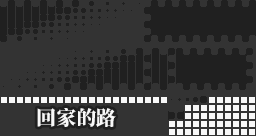
<style>
.page{position:relative;width:256px;height:136px;background:#333333}
.page>*{position:absolute;margin:0}
.t1{font:20px "SourceHanSerifSC-Heavy";color:#f8f8f8}
</style>
<div class="page">
<p class="t1" style="left:37px;top:108px;width:79px;height:19px">回家的路</p>
</div>
